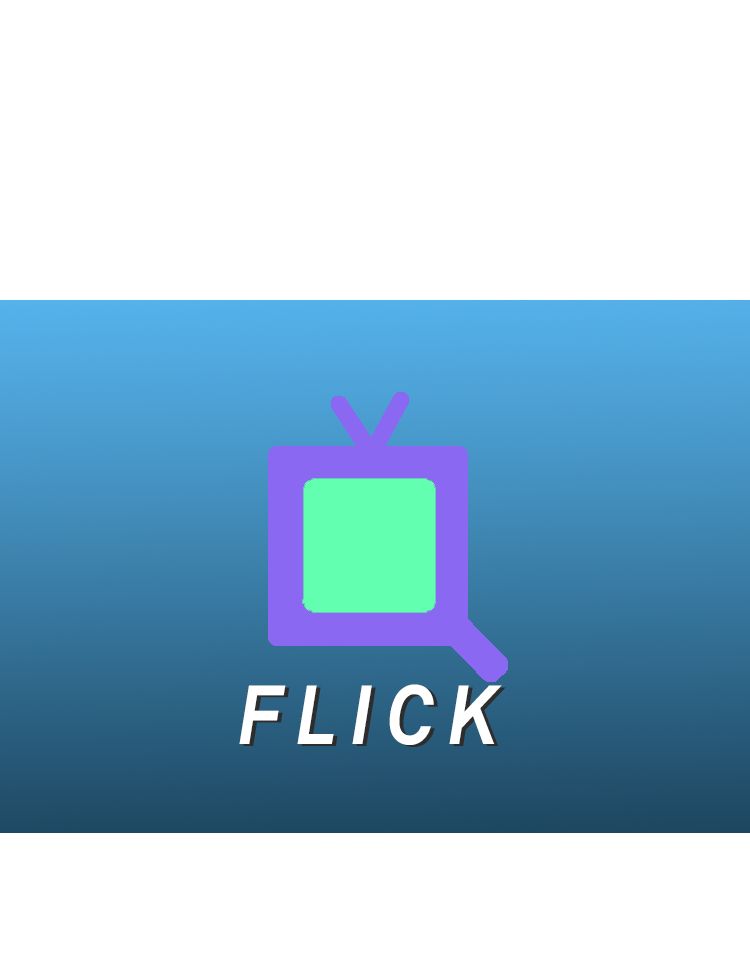
<style>
.page{position:relative;width:750px;height:978px;background:#ffffff}
.page>*{position:absolute;margin:0}
.t1{font:82.5px "Akkurat-BoldItalic";letter-spacing:0.185em;color:#ffffff;scale:0.91 1}
.t2{font:82.5px "Akkurat-BoldItalic";letter-spacing:0.185em;scale:0.91 1}
</style>
<div class="page">
<p class="t1" style="left:239px;top:684px;width:263px;height:61px">FLICK</p>
<p class="t2" style="left:243px;top:686px;width:263px;height:61px">FLICK</p>
</div>
